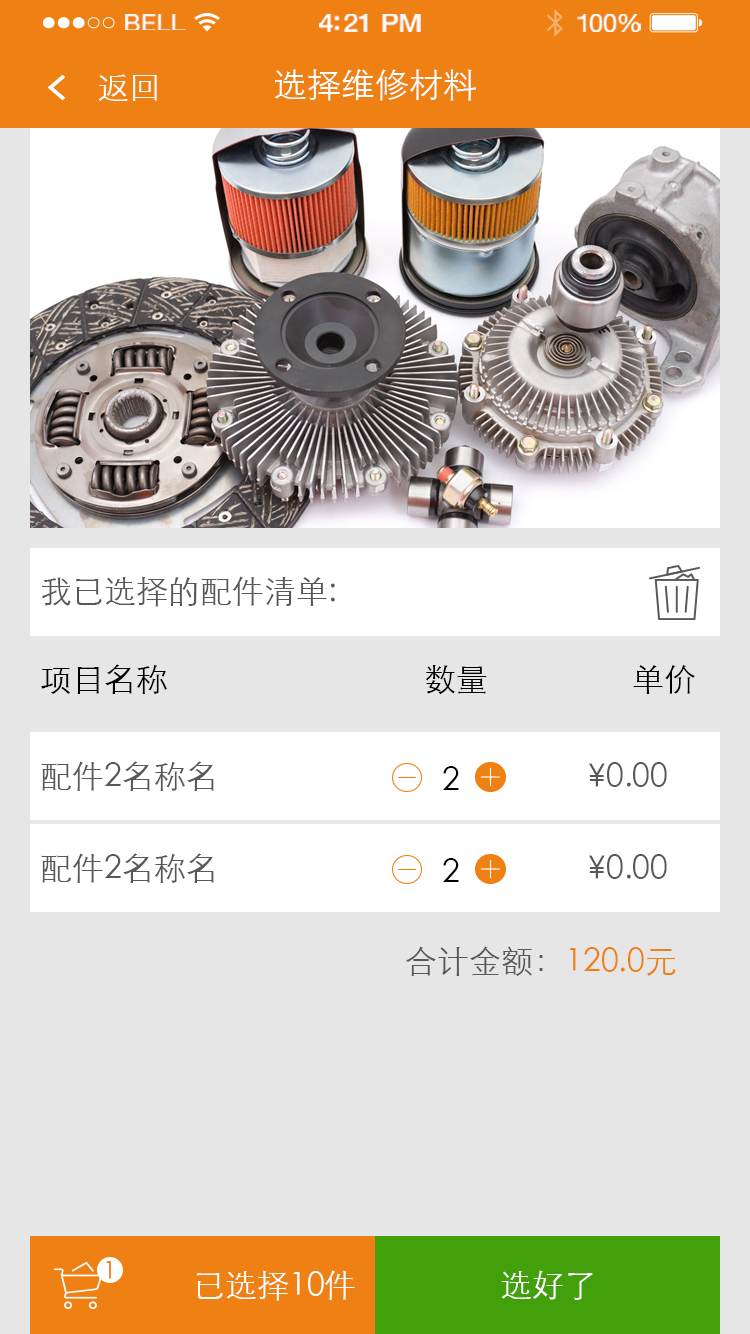
<style>
.page{position:relative;width:750px;height:1334px;background:#e6e6e6}
.page>*{position:absolute;margin:0}
.t1{font:23.3px "HelveticaNeue";letter-spacing:0.02em;color:#ffffff;scale:1.06 1}
.t2{font:25.3px "HelveticaNeue-Medium";letter-spacing:-0.02em;color:#ffffff;scale:1.06 1}
.t3{font:24.3px "HelveticaNeue";letter-spacing:-0.02em;color:#ffffff;scale:1.06 1}
.t4{font:32px "STXihei";color:#ffffff}
.t5{font:34px "STXihei";color:#ffffff}
.t6{font:32px "STXihei";color:#595757}
.t7{font:32px "STXihei";color:#000000}
.t8{font:32px "STXihei";color:#ef8013}
.t9{font:24px "STXihei";color:#ef8013}
</style>
<div class="page">
<p class="t1" style="left:125px;top:14px;width:61px;height:16px">BELL</p>
<p class="t2" style="left:319px;top:14px;width:102px;height:18px">4:21 PM</p>
<p class="t3" style="left:577px;top:14px;width:64px;height:18px">100%</p>
<p class="t4" style="left:98px;top:74px;width:59px;height:27px">返回</p>
<p class="t5" style="left:274px;top:69px;width:202px;height:32px">选择维修材料</p>
<p class="t6" style="left:42px;top:576px;width:293px;height:31px">我已选择的配件清单:</p>
<p class="t7" style="left:41px;top:664px;width:654px;height:30px">项目名称                                数量                  单价</p>
<p class="t6" style="left:41px;top:761px;width:173px;height:30px">配件2名称名</p>
<p class="t7" style="left:443px;top:766px;width:16px;height:24px">2</p>
<p class="t6" style="left:589px;top:762px;width:78px;height:25px">¥0.00</p>
<p class="t6" style="left:41px;top:853px;width:173px;height:30px">配件2名称名</p>
<p class="t6" style="left:589px;top:854px;width:78px;height:25px">¥0.00</p>
<p class="t7" style="left:443px;top:858px;width:16px;height:24px">2</p>
<p class="t8" style="left:406px;top:946px;width:270px;height:30px"><span class="t6">合计金额：</span>120.0元</p>
<p class="t9" style="left:106px;top:1261px;width:5px;height:18px">1</p>
<p class="t4" style="left:197px;top:1270px;width:158px;height:31px">已选择10件</p>
<p class="t4" style="left:501px;top:1270px;width:92px;height:30px">选好了</p>
</div>
